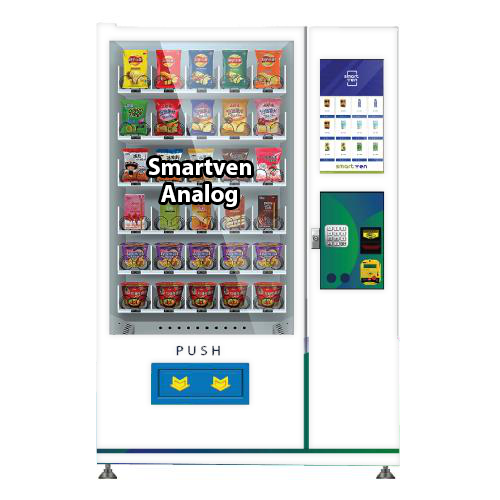
<style>
.page{position:relative;width:500px;height:500px;background:#ffffff}
.page>*{position:absolute;margin:0}
.t1{font:24.2px/13.5px "MyriadPro-Bold";color:#ffffff}
</style>
<div class="page">
<p class="t1" style="left:148px;top:158px;width:103px;height:49px;text-align:center">Smartven<br><br>Analog</p>
</div>
